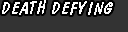
<style>
.page{position:relative;width:128px;height:32px;background:#333333}
.page>*{position:absolute;margin:0}
.t1{font:18px "DomDiagonalBT-Regular";letter-spacing:0.05em;color:#fbfbfb}
.t2{font:18px "DomDiagonalBT-Regular";letter-spacing:0.1em;color:#fbfbfb}
</style>
<div class="page">
<p class="t1" style="left:2px;top:0px;width:111px;height:15px">DEATH DE<span class="t2">FY</span>ING</p>
</div>
